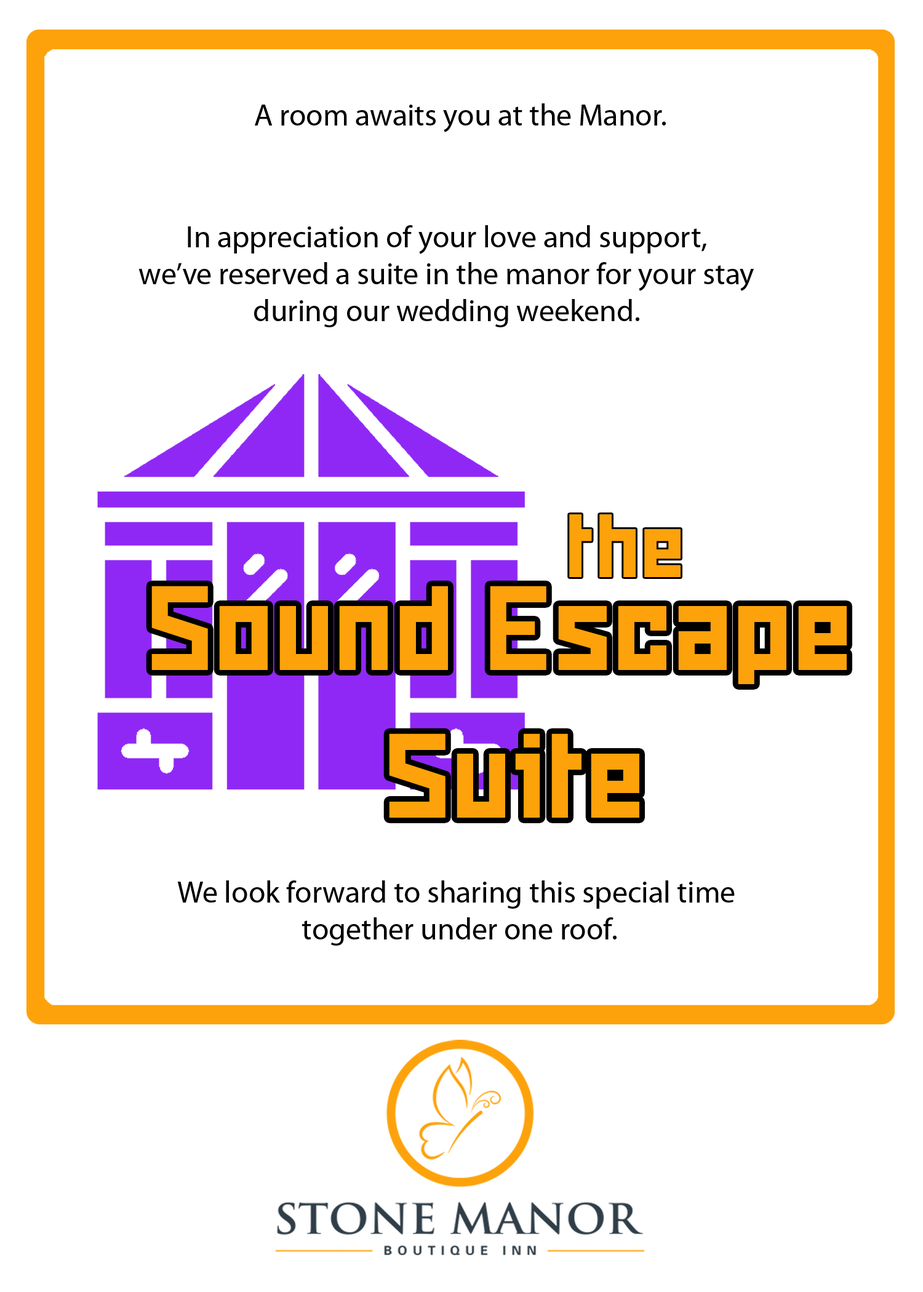
<style>
.page{position:relative;width:923px;height:1292px;background:#ffffff}
.page>*{position:absolute;margin:0}
.t1{font:30.8px "MyriadPro-Regular";color:#000000}
.t2{font:92.3px "Snowstorm";color:#fda20a}
.t3{font:123.1px "Snowstorm";color:#fda20a}
</style>
<div class="page">
<p class="t1" style="left:255px;top:103px;width:411px;height:29px">A room awaits you at the Manor.</p>
<p class="t1" style="left:138px;top:225px;width:616px;height:102px;text-align:center">In appreciation of your love and support, <br>we’ve reserved a suite in the manor for your stay <br>during our wedding weekend.</p>
<p class="t2" style="left:569px;top:514px;width:111px;height:63px">the</p>
<p class="t3" style="left:151px;top:586px;width:696px;height:232px;text-align:center">Sound Escape <br>Suite</p>
<p class="t1" style="left:177px;top:880px;width:558px;height:66px;text-align:center">We look forward to sharing this special time <br>together under one roof.</p>
</div>
